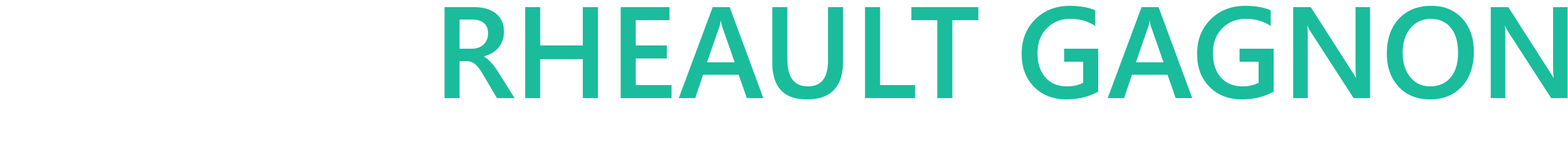
<style>
.page{position:relative;width:1568px;height:163px;background:#ffffff}
.page>*{position:absolute;margin:0}
.t1{font:130px "SegoeUI-Semibold";color:#1abc9c}
</style>
<div class="page">
<p class="t1" style="left:444px;top:6px;width:1124px;height:93px">RHEAULT GAGNON</p>
</div>
